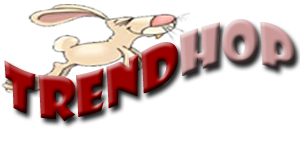
<style>
.page{position:relative;width:300px;height:150px;background:#ffffff}
.page>*{position:absolute;margin:0}
.t1{font:56px/28.7px "ShowcardGothic-Reg"}
</style>
<div class="page">
<p class="t1" style="left:4px;top:19px;width:291px;height:103px;text-align:center">TrendHop</p>
</div>
